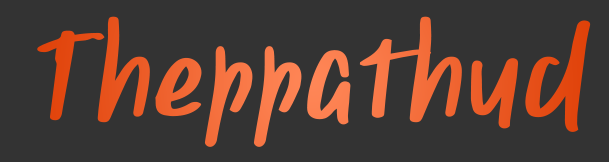
<style>
.page{position:relative;width:609px;height:162px;background:#333333}
.page>*{position:absolute;margin:0}
.t1{font:132.7px "UIDLETTER-Regular";font-weight:bold}
</style>
<div class="page">
<p class="t1" style="left:37px;top:16px;width:554px;height:131px">Theppathud</p>
</div>
